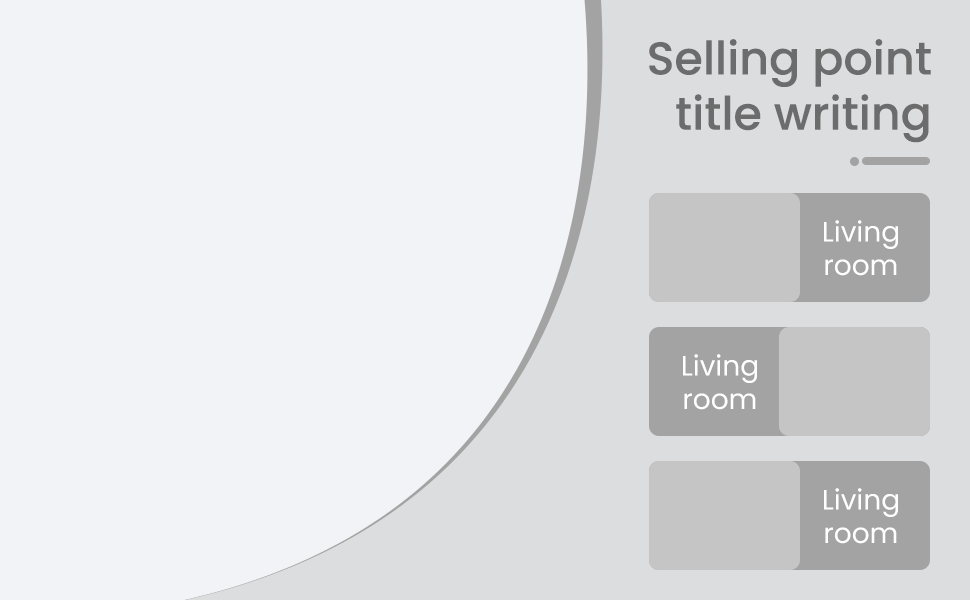
<style>
.page{position:relative;width:970px;height:600px;background:#f2f3f6}
.page>*{position:absolute;margin:0}
.t1{font:46px "Poppins-Medium";color:#6c6c6c}
.t2{font:28px "Poppins-Regular";color:#ffffff}
</style>
<div class="page">
<p class="t1" style="left:649px;top:39px;width:282px;height:104px;text-align:right">Selling point<br>title writing</p>
<p class="t2" style="left:824px;top:220px;width:74px;height:56px;text-align:center">Living<br>room</p>
<p class="t2" style="left:683px;top:354px;width:74px;height:56px;text-align:center">Living<br>room</p>
<p class="t2" style="left:824px;top:488px;width:74px;height:56px;text-align:center">Living<br>room</p>
</div>
